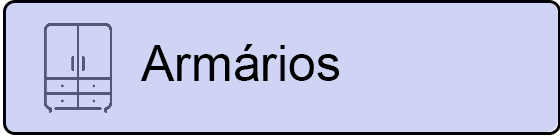
<style>
.page{position:relative;width:560px;height:138px;background:#cfd3f4}
.page>*{position:absolute;margin:0}
.t1{font:50px "ArialMT";color:#000000}
</style>
<div class="page">
<p class="t1" style="left:141px;top:44px;width:199px;height:37px">Armários</p>
</div>
